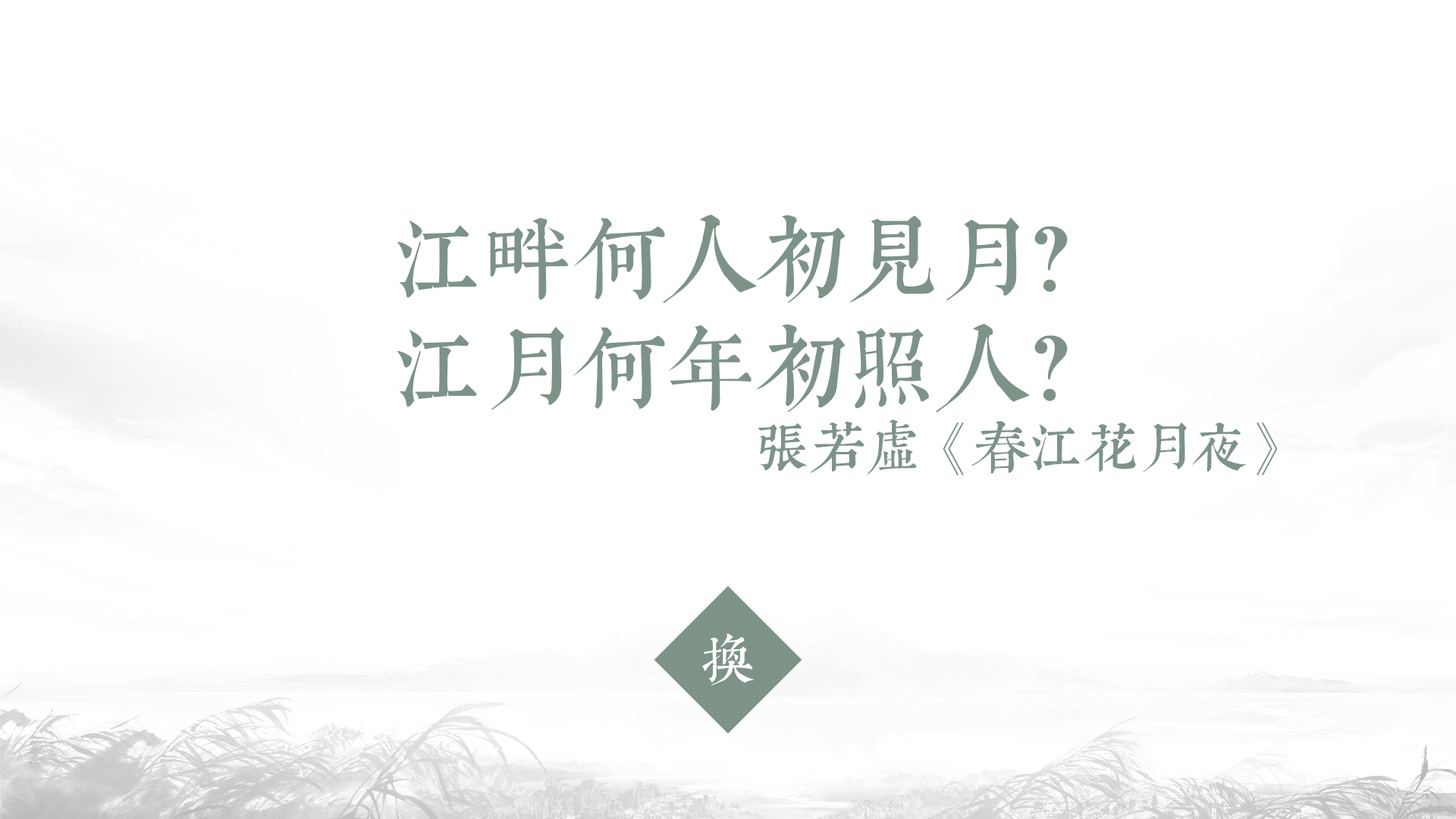
<style>
.page{position:relative;width:1456px;height:819px;background:#ffffff}
.page>*{position:absolute;margin:0}
.t1{font:91px "WenYue-GuDianMingChaoTi-NC-W5";color:#7d9388}
.t2{font:54.6px "WenYue-GuDianMingChaoTi-NC-W5";color:#7d9388}
.t3{font:54.6px "WenYue-GuDianMingChaoTi-NC-W5";color:#ffffff}
</style>
<div class="page">
<p class="t1" style="left:397px;top:215px;width:881px;height:260px;text-align:center">江畔何人初见月？<br>江月何年初照人？<br><span class="t2">张若虚《春江花月夜》</span></p>
<p class="t3" style="left:702px;top:633px;width:52px;height:53px">换</p>
</div>
